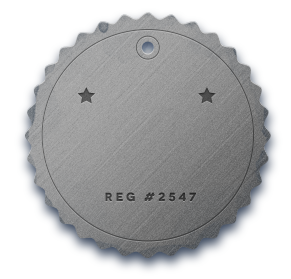
<style>
.page{position:relative;width:291px;height:279px;background:#ffffff}
.page>*{position:absolute;margin:0}
.t1{font:11.9px "Novecentowide-Bold";letter-spacing:0.24em;color:#383838;text-transform:uppercase}
</style>
<div class="page">
<p class="t1" style="left:105px;top:192px;width:91px;height:10px">reg #2547</p>
</div>
